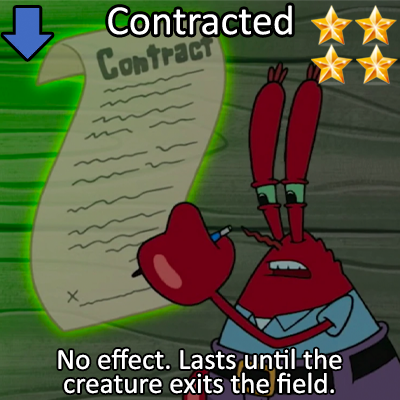
<style>
.page{position:relative;width:400px;height:400px}
.page>*{position:absolute;margin:0}
.t1{font:72px "Calibri";color:#ffffff}
.t2{font:50px/24px "Calibri";color:#ffffff}
</style>
<div class="page">
<p class="t1" style="left:108px;top:5px;width:184px;height:30px">Contracted</p>
<p class="t2" style="left:58px;top:348px;width:284px;height:46px;text-align:center">No effect. Lasts until the<br>creature exits the field.</p>
</div>
